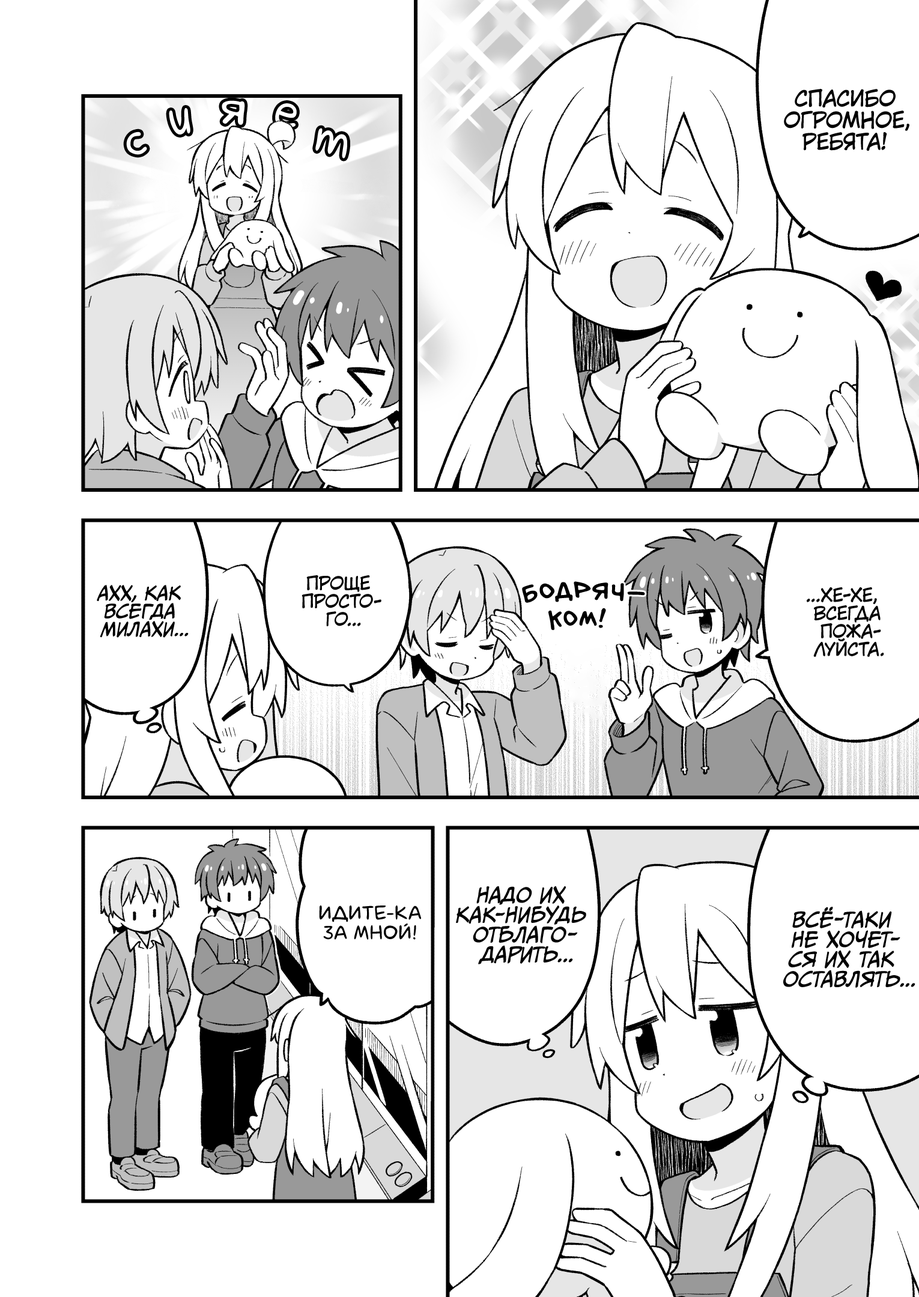
<style>
.page{position:relative;width:919px;height:1297px;background:#ffffff}
.page>*{position:absolute;margin:0}
.t1{font:21.6px "KuraiVoice2";color:#000000;text-transform:uppercase}
.t2{font:45.1px "laCartoonerie";color:#ffffff;scale:1.1 1}
.t3{font:49.6px "laCartoonerie";color:#ffffff;scale:0.91 1}
.t4{font:45.1px "laCartoonerie";color:#ffffff}
.t5{font:18px "KuraiVoice2";color:#000000;text-transform:uppercase}
.t6{font:28.8px "v_BillyTheFlyingRobotBBLC";color:#000000;text-transform:uppercase}
.t7{font:18px "CCMeanwhile";color:#000000;text-transform:uppercase;font-style:italic}
.t8{font:19.8px "CCMeanwhile";color:#000000;text-transform:uppercase;font-style:italic}
.t9{font:19.8px "laCartoonerie";color:#000000;text-transform:uppercase}
</style>
<div class="page">
<p class="t1" style="left:784px;top:89px;width:125px;height:62px;text-align:center">Спасибо<br>огромное,<br>ребята!</p>
<p class="t2" style="left:222px;top:100px;width:23px;height:25px;rotate:4deg">я</p>
<p class="t3" style="left:169px;top:108px;width:21px;height:27px;rotate:-6deg">и</p>
<p class="t4" style="left:275px;top:103px;width:22px;height:25px;rotate:11deg">е</p>
<p class="t4" style="left:126px;top:132px;width:21px;height:23px;rotate:-8deg">с</p>
<p class="t4" style="left:315px;top:128px;width:32px;height:31px;rotate:14deg">т</p>
<p class="t5" style="left:302px;top:575px;width:79px;height:52px;text-align:center">Проще<br>просто-<br>го...</p>
<p class="t6" style="left:522px;top:581px;width:123px;height:50px;text-align:center">бодряч-<br>ком!</p>
<p class="t7" style="left:97px;top:585px;width:92px;height:53px;text-align:center">Ахх, как<br>всегда<br>милахи...</p>
<p class="t5" style="left:807px;top:587px;width:77px;height:70px;text-align:center">...Хе-хе,<br>всегда<br>пожа-<br>луйста.</p>
<p class="t8" style="left:456px;top:886px;width:130px;height:79px;text-align:center">Надо их<br>как-нибудь<br>отблаго-<br>дарить...</p>
<p class="t9" style="left:319px;top:906px;width:102px;height:34px;text-align:center">Идите-ка<br>за мной!</p>
<p class="t8" style="left:783px;top:907px;width:132px;height:82px;text-align:center">Всё-таки<br>не хочет-<br>ся их так<br>оставлять...</p>
</div>
